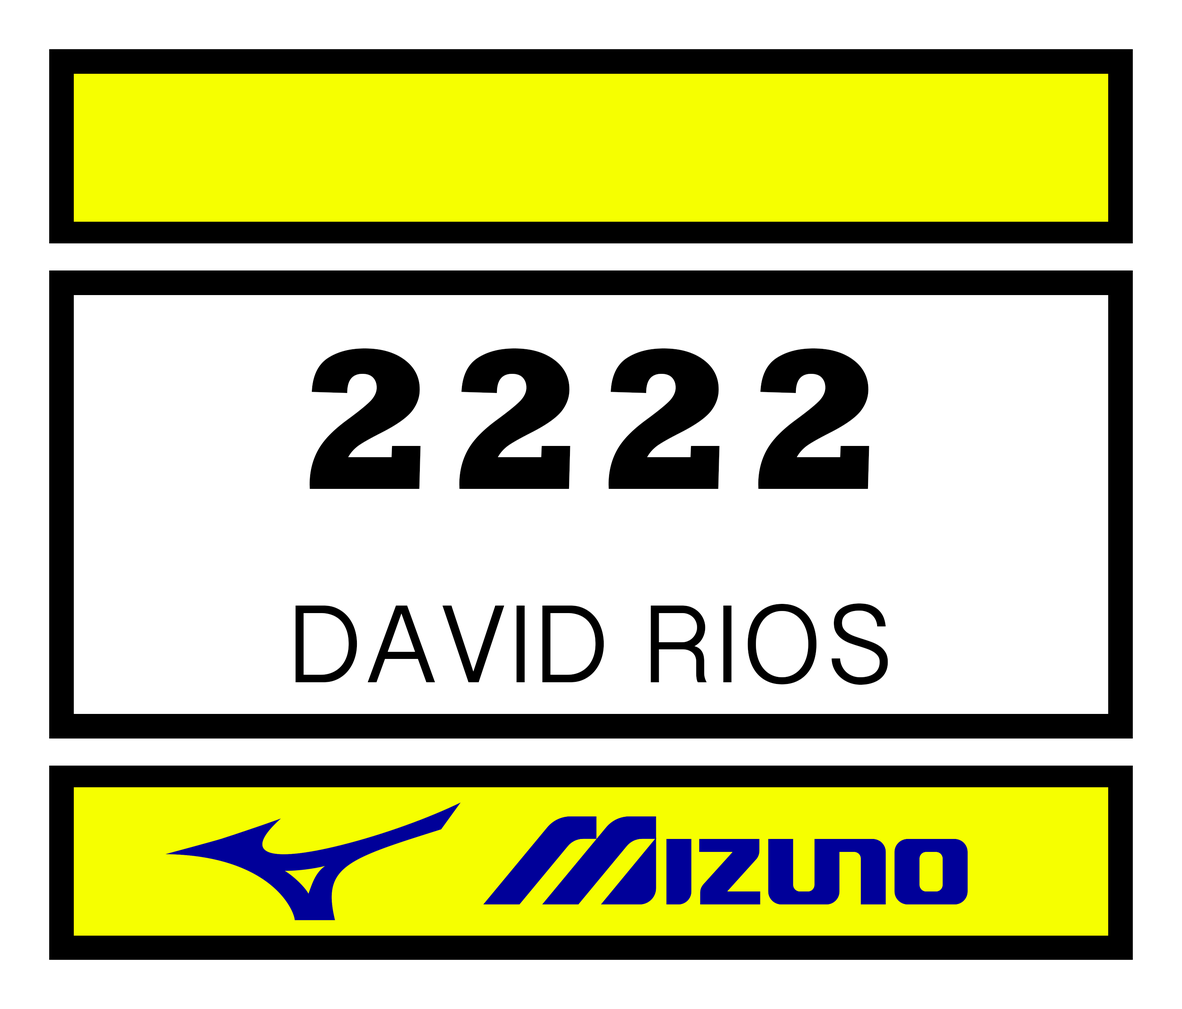
<style>
.page{position:relative;width:1182px;height:1009px;background:#ffffff}
.page>*{position:absolute;margin:0}
.t1{font:347.3px "Rockwell-ExtraBold";letter-spacing:0.05em;color:#000000}
.t2{font:173.7px "SinhalaSangamMN";letter-spacing:0.05em;color:#000000}
</style>
<div class="page">
<p class="t1" style="left:309px;top:348px;width:560px;height:141px">2222</p>
<p class="t2" style="left:295px;top:604px;width:593px;height:81px">DAVID RIOS</p>
</div>
